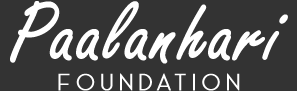
<style>
.page{position:relative;width:297px;height:91px;background:#333333}
.page>*{position:absolute;margin:0}
.t1{font:91px "FreestyleScript-Regular";color:#ffffff;font-weight:bold}
.t2{font:24.3px "AceSansDemo";letter-spacing:0.2em;color:#ffffff;font-weight:bold}
</style>
<div class="page">
<p class="t1" style="left:10px;top:1px;width:278px;height:63px">Paalanhari</p>
<p class="t2" style="left:58px;top:73px;width:182px;height:18px">Foundation</p>
</div>
